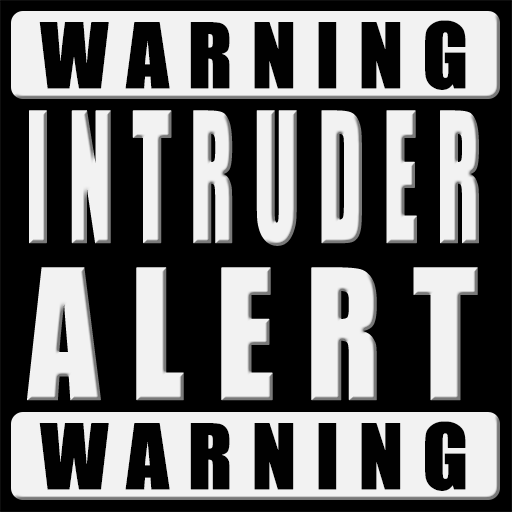
<style>
.page{position:relative;width:512px;height:512px;background:#000000}
.page>*{position:absolute;margin:0}
.t1{font:83.3px "Impact";letter-spacing:0.2em;color:#010101;font-weight:bold}
.t2{font:166.7px "Impact";letter-spacing:0.2em;color:#ffffff;font-weight:bold;scale:0.5 1}
.t3{font:166.7px "Impact";letter-spacing:0.2em;color:#ffffff;font-weight:bold;scale:0.84 1}
</style>
<div class="page">
<p class="t1" style="left:39px;top:20px;width:427px;height:70px">WARNING</p>
<p class="t2" style="left:29px;top:110px;width:450px;height:136px">INTRUDER</p>
<p class="t3" style="left:27px;top:267px;width:451px;height:134px">ALERT</p>
<p class="t1" style="left:39px;top:421px;width:427px;height:70px">WARNING</p>
</div>
